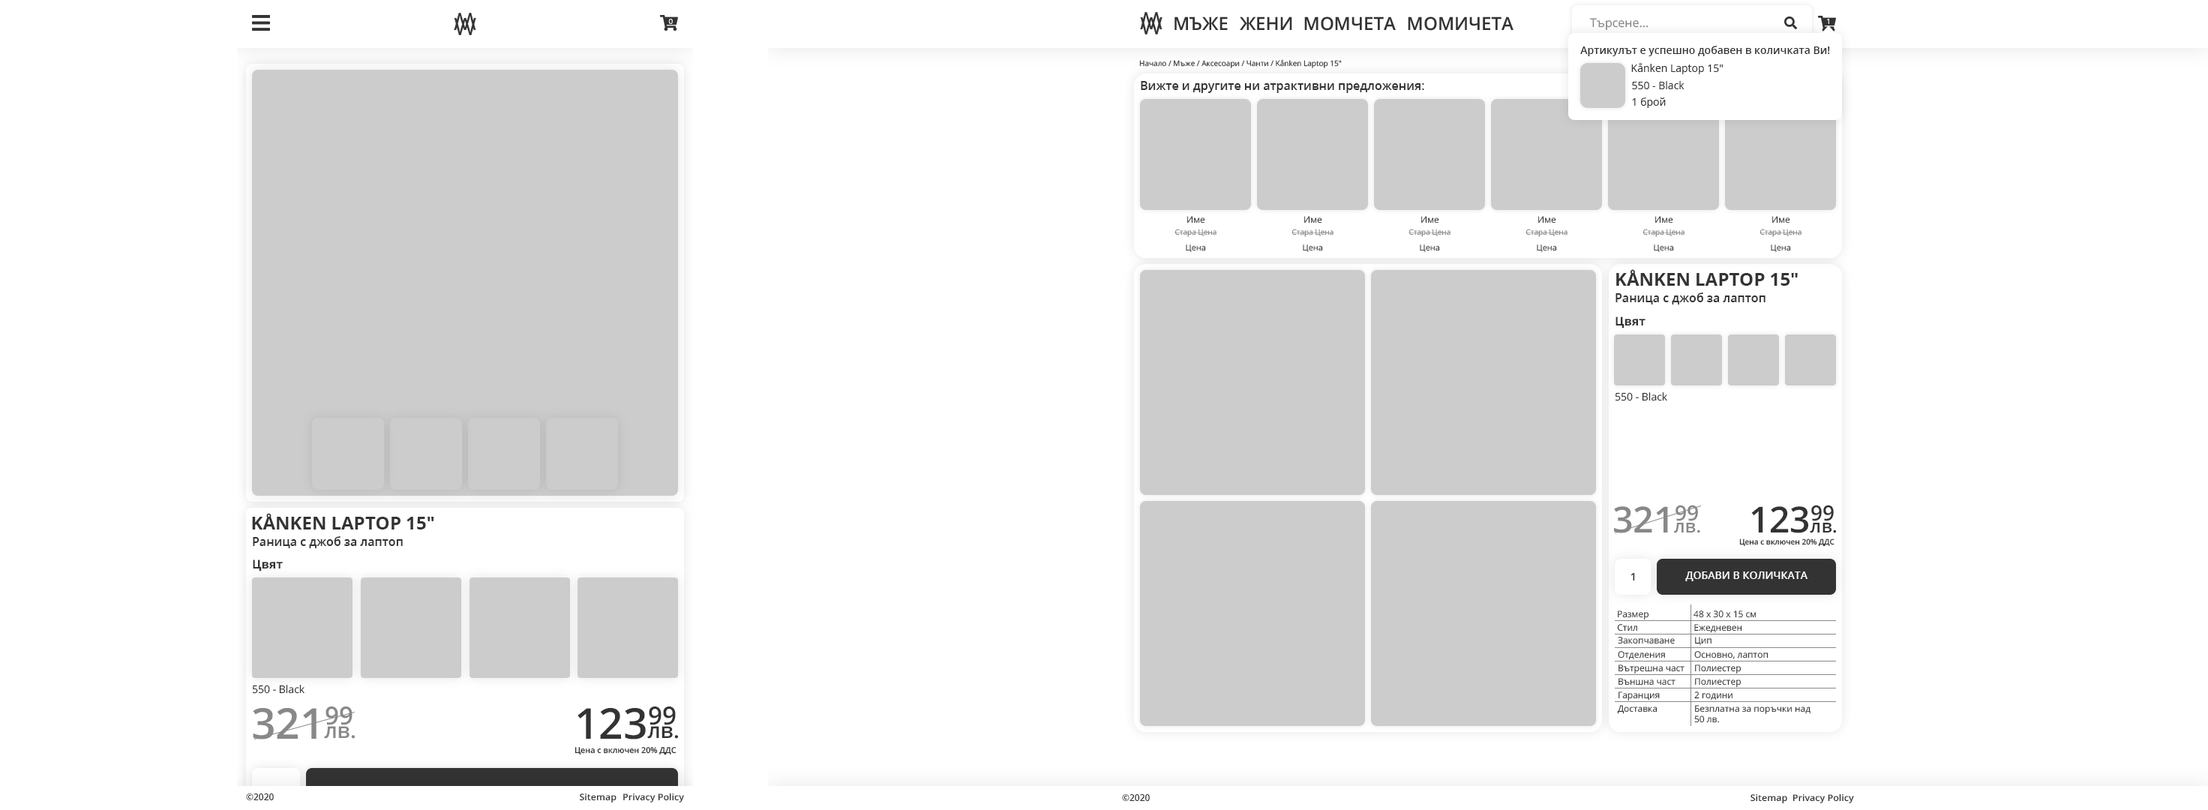
<style>
.page{position:relative;width:2208px;height:810px;background:#ffffff}
.page>*{position:absolute;margin:0}
.t1{font:12px "OpenSans";color:#888888}
.t2{font:7.5px "OpenSans";color:#ffffff}
.t3{font:10.5px "OpenSans-Semibold";color:#333333}
.t4{font:7.5px "OpenSans";color:#333333}
.t5{font:10.5px "OpenSans";color:#333333}
.t6{font:12px "OpenSans-Semibold";color:#333333}
.t7{font:9px "OpenSans";color:#333333}
.t8{font:7.5px "OpenSans";color:#888888}
.t9{font:8.3px "OpenSans";color:#333333}
.t10{font:18px "OpenSans-Bold";color:#333333;text-transform:uppercase}
.t11{font:12px "OpenSans-Bold";color:#333333}
.t12{font:36px "OpenSans-Semibold";color:#888888}
.t13{font:36px "OpenSans-Semibold";color:#333333}
.t14{font:18px "OpenSans-Semibold";color:#888888}
.t15{font:18px "OpenSans-Semibold";color:#333333}
.t16{font:7.5px "OpenSans-Semibold";color:#333333}
.t17{font:10.5px "OpenSans-Semibold";color:#ffffff}
.t18{font:42.6px "OpenSans-Semibold";color:#888888}
.t19{font:42.6px "OpenSans-Semibold";color:#333333}
.t20{font:8.9px "OpenSans";color:#333333}
.t21{font:21.3px "OpenSans-Semibold";color:#888888}
.t22{font:21.3px "OpenSans-Semibold";color:#333333}
.t23{font:8px "OpenSans-Semibold";color:#333333}
.t24{font:9px "OpenSans-Semibold";color:#333333}
.t25{font:9px "OpenSans-Semibold";color:#333333;scale:1.04 1}
</style>
<div class="page">
<p class="t1" style="left:1590px;top:18px;width:58px;height:12px">Търсене...</p>
<p class="t2" style="left:668px;top:19px;width:5px;height:5px">0</p>
<p class="t2" style="left:1827px;top:19px;width:2px;height:5px">1</p>
<p class="t3" style="left:1580px;top:46px;width:250px;height:10px">Артикулът е успешно добавен в количката Ви!</p>
<p class="t4" style="left:1139px;top:59px;width:203px;height:9px">Начало / Мъже / Аксесоари / Чанти / Kånken Laptop 15"</p>
<p class="t5" style="left:1631px;top:63px;width:92px;height:11px">Kånken Laptop 15"</p>
<p class="t6" style="left:1141px;top:81px;width:283px;height:12px">Вижте и другите ни атрактивни предложения:</p>
<p class="t5" style="left:1632px;top:81px;width:52px;height:8px">550 - Black</p>
<p class="t5" style="left:1632px;top:97px;width:34px;height:11px">1 брой</p>
<p class="t7" style="left:1187px;top:216px;width:18px;height:7px">Име</p>
<p class="t7" style="left:1304px;top:216px;width:18px;height:7px">Име</p>
<p class="t7" style="left:1421px;top:216px;width:18px;height:7px">Име</p>
<p class="t7" style="left:1538px;top:216px;width:18px;height:7px">Име</p>
<p class="t7" style="left:1655px;top:216px;width:18px;height:7px">Име</p>
<p class="t7" style="left:1772px;top:216px;width:18px;height:7px">Име</p>
<p class="t8" style="left:1174px;top:229px;width:43px;height:8px">Стара Цена</p>
<p class="t8" style="left:1291px;top:229px;width:43px;height:8px">Стара Цена</p>
<p class="t8" style="left:1408px;top:229px;width:43px;height:8px">Стара Цена</p>
<p class="t8" style="left:1525px;top:229px;width:43px;height:8px">Стара Цена</p>
<p class="t8" style="left:1642px;top:229px;width:43px;height:8px">Стара Цена</p>
<p class="t8" style="left:1759px;top:229px;width:43px;height:8px">Стара Цена</p>
<p class="t9" style="left:1186px;top:244px;width:20px;height:9px">Цена</p>
<p class="t9" style="left:1303px;top:244px;width:20px;height:9px">Цена</p>
<p class="t9" style="left:1420px;top:244px;width:20px;height:9px">Цена</p>
<p class="t9" style="left:1537px;top:244px;width:20px;height:9px">Цена</p>
<p class="t9" style="left:1654px;top:244px;width:20px;height:9px">Цена</p>
<p class="t9" style="left:1771px;top:244px;width:20px;height:9px">Цена</p>
<p class="t10" style="left:1616px;top:269px;width:182px;height:17px">KÅNKEN LAPTOP 15"</p>
<p class="t6" style="left:1615px;top:292px;width:150px;height:12px">Раница с джоб за лаптоп</p>
<p class="t11" style="left:1615px;top:316px;width:30px;height:12px">Цвят</p>
<p class="t5" style="left:1615px;top:392px;width:52px;height:9px">550 - Black</p>
<p class="t12" style="left:1614px;top:505px;width:84px;height:28px">32199</p>
<p class="t13" style="left:1751px;top:505px;width:83px;height:28px">12399</p>
<p class="t10" style="left:252px;top:513px;width:182px;height:16px">KÅNKEN LAPTOP 15"</p>
<p class="t14" style="left:1674px;top:523px;width:26px;height:10px">лв.</p>
<p class="t15" style="left:1810px;top:523px;width:26px;height:10px">лв.</p>
<p class="t6" style="left:253px;top:536px;width:150px;height:12px">Раница с джоб за лаптоп</p>
<p class="t16" style="left:1739px;top:538px;width:95px;height:9px">Цена с включен 20% ДДС</p>
<p class="t11" style="left:253px;top:559px;width:30px;height:12px">Цвят</p>
<p class="t3" style="left:1630px;top:573px;width:5px;height:7px">1</p>
<p class="t17" style="left:1685px;top:571px;width:122px;height:10px">ДОБАВИ В КОЛИЧКАТА</p>
<p class="t7" style="left:1618px;top:610px;width:31px;height:10px">Размер</p>
<p class="t7" style="left:1693px;top:610px;width:63px;height:8px">48 x 30 x 15 см</p>
<p class="t7" style="left:1617px;top:624px;width:20px;height:7px">Стил</p>
<p class="t7" style="left:1694px;top:624px;width:48px;height:9px">Eжедневен</p>
<p class="t7" style="left:1618px;top:637px;width:57px;height:7px">Закопчаване</p>
<p class="t7" style="left:1695px;top:637px;width:16px;height:9px">Цип</p>
<p class="t7" style="left:1618px;top:651px;width:47px;height:9px">Отделения</p>
<p class="t7" style="left:1694px;top:651px;width:74px;height:8px">Основно, лаптоп</p>
<p class="t7" style="left:1618px;top:664px;width:66px;height:10px">Вътрешна част</p>
<p class="t7" style="left:1695px;top:664px;width:46px;height:10px">Полиестер</p>
<p class="t7" style="left:1618px;top:678px;width:57px;height:7px">Външна част</p>
<p class="t7" style="left:1695px;top:678px;width:46px;height:10px">Полиестер</p>
<p class="t5" style="left:252px;top:685px;width:52px;height:9px">550 - Black</p>
<p class="t7" style="left:1618px;top:691px;width:42px;height:10px">Гаранция</p>
<p class="t7" style="left:1694px;top:691px;width:38px;height:9px">2 години</p>
<p class="t18" style="left:253px;top:706px;width:99px;height:33px">32199</p>
<p class="t19" style="left:577px;top:706px;width:99px;height:33px">12399</p>
<p class="t20" style="left:1617px;top:705px;width:40px;height:9px">Доставка</p>
<p class="t20" style="left:1694px;top:705px;width:116px;height:18px">Безплатна за поръчки над <br>50 лв.</p>
<p class="t21" style="left:324px;top:726px;width:31px;height:13px">лв.</p>
<p class="t22" style="left:647px;top:726px;width:31px;height:13px">лв.</p>
<p class="t23" style="left:574px;top:747px;width:102px;height:8px">Цена с включен 20% ДДС</p>
<p class="t24" style="left:246px;top:793px;width:28px;height:7px">©2020</p>
<p class="t25" style="left:580px;top:793px;width:36px;height:9px">Sitemap</p>
<p class="t25" style="left:623px;top:793px;width:61px;height:9px">Privacy Policy</p>
<p class="t24" style="left:1122px;top:794px;width:28px;height:7px">©2020</p>
<p class="t25" style="left:1750px;top:794px;width:37px;height:10px">Sitemap</p>
<p class="t25" style="left:1792px;top:793px;width:62px;height:10px">Privacy Policy</p>
</div>
